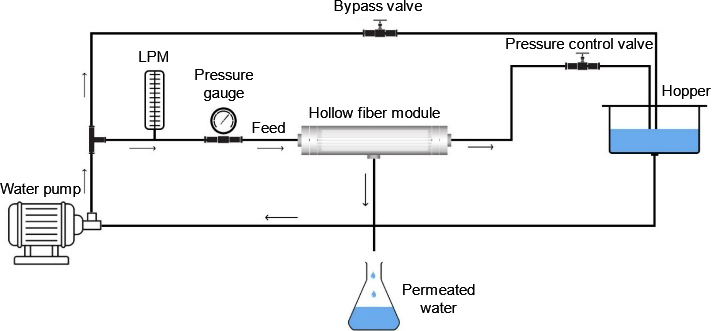
<style>
.page{position:relative;width:712px;height:331px;background:#ffffff}
.page>*{position:absolute;margin:0}
.t1{font:15.3px "ArialMT";color:#000000}
.t2{font:15.3px/18.3px "ArialMT";color:#000000}
</style>
<div class="page">
<p class="t1" style="left:334px;top:0px;width:88px;height:14px">Bypass valve</p>
<p class="t1" style="left:506px;top:38px;width:147px;height:11px">Pressure control valve</p>
<p class="t1" style="left:139px;top:51px;width:29px;height:11px">LPM</p>
<p class="t2" style="left:195px;top:69px;width:58px;height:32px;text-align:center">Pressure<br>gauge</p>
<p class="t1" style="left:662px;top:85px;width:49px;height:14px">Hopper</p>
<p class="t1" style="left:309px;top:107px;width:131px;height:11px">Hollow fiber module</p>
<p class="t1" style="left:252px;top:122px;width:33px;height:11px">Feed</p>
<p class="t1" style="left:0px;top:183px;width:81px;height:14px">Water pump</p>
<p class="t2" style="left:403px;top:284px;width:72px;height:29px;text-align:center">Permeated<br>water</p>
</div>
